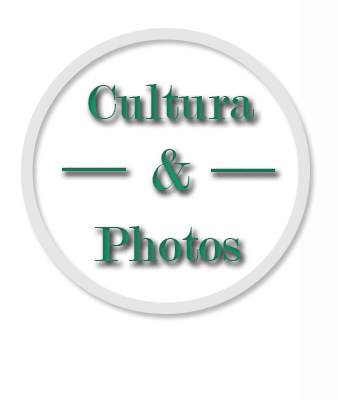
<style>
.page{position:relative;width:338px;height:400px;background:#ffffff}
.page>*{position:absolute;margin:0}
.t1{font:53.3px "Modern-Regular";letter-spacing:0.01em;color:#1a7c59}
.t2{font:64px "Modern-Regular";color:#1b976d}
.t3{font:64px "MyriadPro-Regular";color:#1a7353}
.t4{font:53.3px "Modern-Regular";color:#1a7d5a}
</style>
<div class="page">
<p class="t1" style="left:88px;top:84px;width:166px;height:35px">Cultura</p>
<p class="t2" style="left:152px;top:149px;width:38px;height:41px">&amp;</p>
<p class="t3" style="left:62px;top:167px;width:64px;height:4px">__</p>
<p class="t3" style="left:211px;top:168px;width:64px;height:4px">__</p>
<p class="t4" style="left:95px;top:226px;width:146px;height:35px">Photos</p>
</div>
